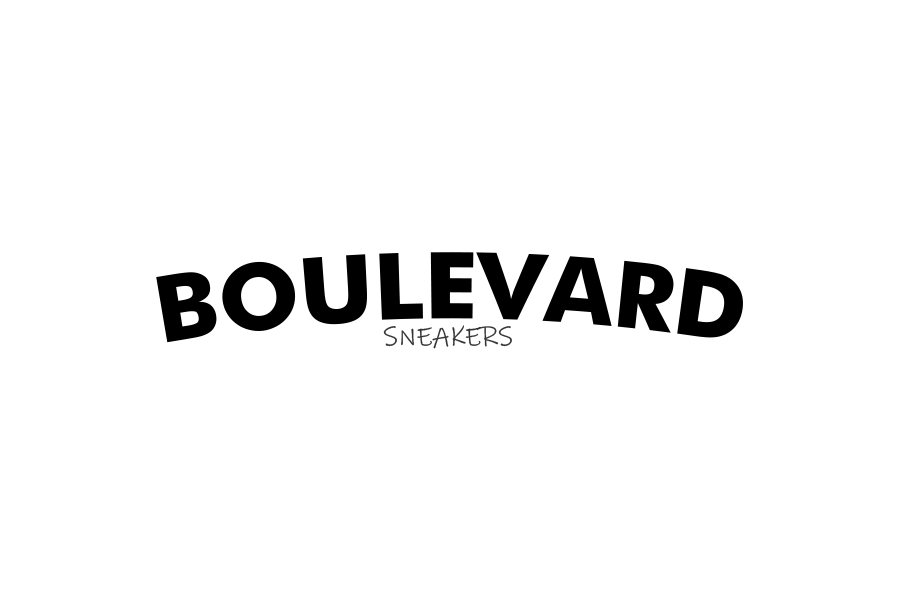
<style>
.page{position:relative;width:900px;height:600px;background:#ffffff}
.page>*{position:absolute;margin:0}
.t1{font:91.7px "Futura-Bold";color:#000000}
.t2{font:27.1px "InkFree";color:#333333}
</style>
<div class="page">
<p class="t1" style="left:156px;top:252px;width:587px;height:91px">BOULEVARD</p>
<p class="t2" style="left:383px;top:325px;width:129px;height:24px">SNEAKERS</p>
</div>
